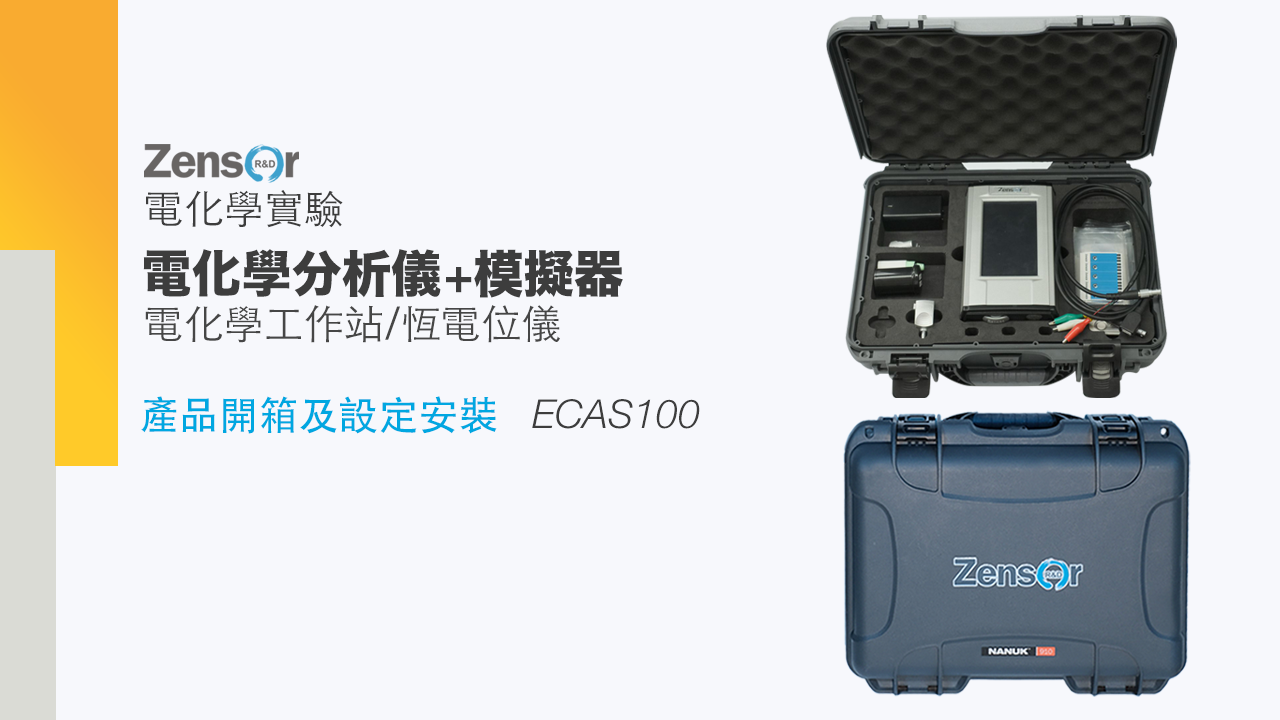
<style>
.page{position:relative;width:1280px;height:720px;background:#f7f8fc}
.page>*{position:absolute;margin:0}
.t1{font:40px "STHeitiTC-Light";color:#3d3d3d}
.t2{font:50px "HiraKakuStd-W8";color:#3d3d3d}
.t3{font:50px "HelveticaNeueLTPro-Bd";color:#3d3d3d}
.t4{font:40px "STHeitiTC-Light";color:#464646}
.t5{font:40px "STHeitiTC-Medium";color:#00a7e1}
.t6{font:40px "HelveticaNeueLTPro-LtIt";color:#3d3d3d}
</style>
<div class="page">
<p class="t1" style="left:146px;top:190px;width:197px;height:38px">電化學實驗</p>
<p class="t2" style="left:143px;top:249px;width:298px;height:49px">電化學分析儀</p>
<p class="t2" style="left:446px;top:249px;width:177px;height:49px"><span class="t3">+</span>模擬器</p>
<p class="t4" style="left:145px;top:305px;width:415px;height:38px">電化學工作站/恆電位儀</p>
<p class="t5" style="left:141px;top:396px;width:356px;height:38px">產品開箱及設定安裝</p>
<p class="t6" style="left:532px;top:399px;width:168px;height:30px">ECAS100</p>
</div>
